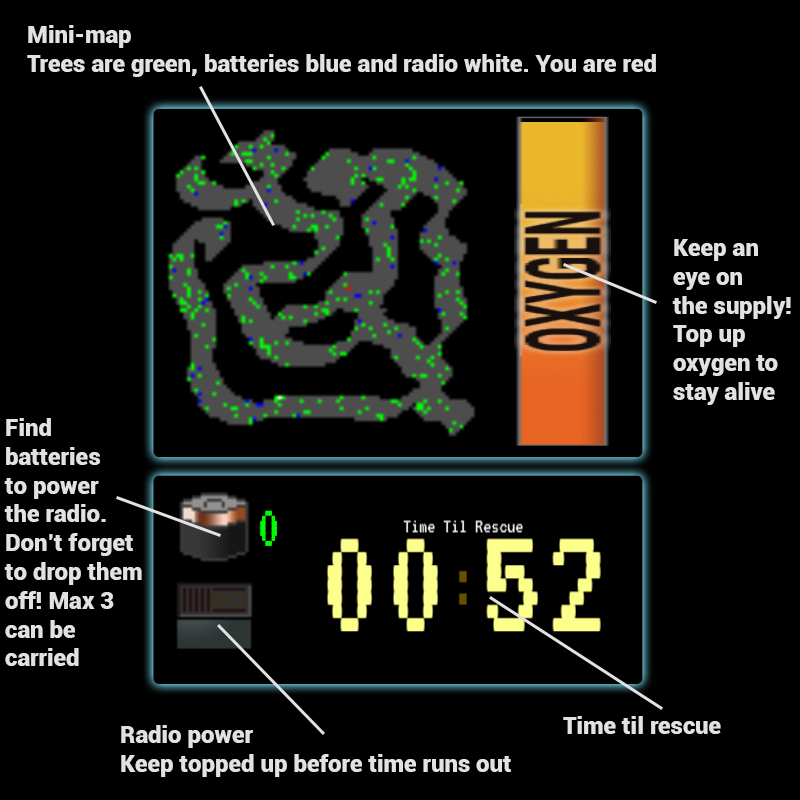
<style>
.page{position:relative;width:800px;height:800px;background:#000000}
.page>*{position:absolute;margin:0}
.t1{font:24px "Roboto-Black";color:#e3e1e1}
</style>
<div class="page">
<p class="t1" style="left:27px;top:25px;width:629px;height:52px">Mini-map<br>Trees are green, batteries blue and radio white. You are red</p>
<p class="t1" style="left:672px;top:239px;width:119px;height:166px">Keep an<br>eye on<br>the supply!<br>Top up<br>oxygen to<br>stay alive</p>
<p class="t1" style="left:4px;top:418px;width:138px;height:248px">Find <br>batteries<br>to power<br>the radio.<br>Don’t forget<br>to drop them<br>off! Max 3<br>can be <br>carried</p>
<p class="t1" style="left:121px;top:725px;width:390px;height:52px">Radio power<br>Keep topped up before time runs out</p>
<p class="t1" style="left:563px;top:716px;width:158px;height:18px">Time til rescue</p>
</div>
